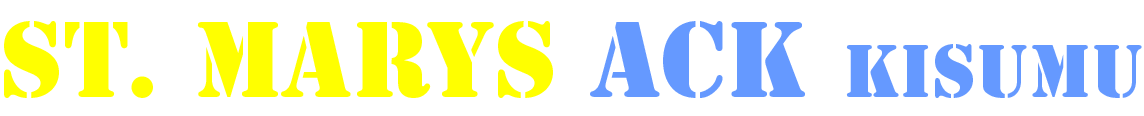
<style>
.page{position:relative;width:1144px;height:116px;background:#ffffff}
.page>*{position:absolute;margin:0}
.t1{font:100px "StencilStd";color:#ffff00}
.t2{font:100px "StencilStd";color:#6599ff}
.t3{font:70px "StencilStd";color:#6599ff}
</style>
<div class="page">
<p class="t1" style="left:4px;top:21px;width:1138px;height:77px">ST. MARYS <span class="t2">ACK </span><span class="t3">KISUMU</span></p>
</div>
